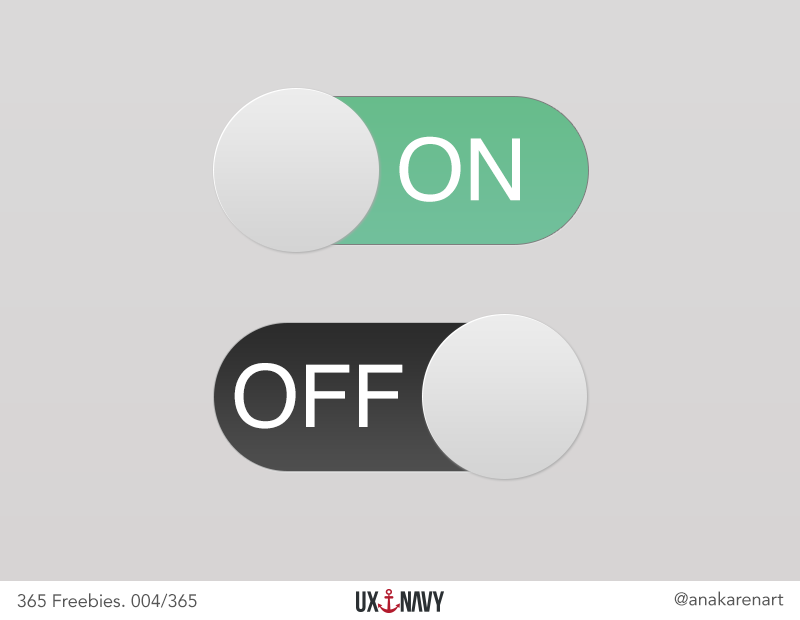
<style>
.page{position:relative;width:800px;height:620px}
.page>*{position:absolute;margin:0}
.t1{font:86.3px "Helvetica";color:#ffffff}
.t2{font:86.8px "Helvetica";color:#ffffff}
.t3{font:18px "Avenir-Roman";color:#565656}
</style>
<div class="page">
<p class="t1" style="left:399px;top:136px;width:121px;height:66px">ON</p>
<p class="t2" style="left:234px;top:363px;width:169px;height:66px">OFF</p>
<p class="t3" style="left:17px;top:593px;width:180px;height:15px">365 Freebies. 004/365</p>
<p class="t3" style="left:674px;top:591px;width:110px;height:15px">@anakarenart</p>
</div>
